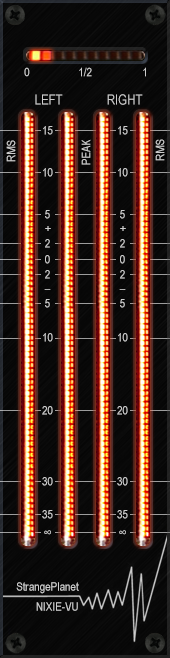
<style>
.page{position:relative;width:170px;height:658px}
.page>*{position:absolute;margin:0}
.t1{font:12px "ArialNarrow"}
.t2{font:12px "ArialNarrow";color:#cdcdcd}
.t3{font:12px "ArialNarrow";color:#cecece}
.t4{font:14px "ArialNarrow";color:#cecece}
.t5{font:12px/10px "ArialNarrow";color:#cecece}
</style>
<div class="page">
<p class="t1" style="left:24px;top:67px;width:6px;height:10px">0</p>
<p class="t2" style="left:79px;top:67px;width:13px;height:10px">1/2</p>
<p class="t3" style="left:143px;top:67px;width:3px;height:10px">1</p>
<p class="t4" style="left:35px;top:94px;width:28px;height:11px">LEFT</p>
<p class="t4" style="left:107px;top:94px;width:36px;height:11px">RIGHT</p>
<p class="t3" style="left:43px;top:126px;width:10px;height:9px">15</p>
<p class="t2" style="left:118px;top:126px;width:10px;height:9px">15</p>
<p class="t3" style="left:6px;top:140px;width:10px;height:22px;rotate:-90deg">RMS</p>
<p class="t2" style="left:81px;top:139px;width:10px;height:26px;rotate:-90deg">PEAK</p>
<p class="t3" style="left:155px;top:139px;width:10px;height:22px;rotate:-90deg">RMS</p>
<p class="t3" style="left:43px;top:168px;width:10px;height:9px">10</p>
<p class="t3" style="left:118px;top:168px;width:10px;height:9px">10</p>
<p class="t3" style="left:45px;top:210px;width:5px;height:9px">5</p>
<p class="t3" style="left:120px;top:210px;width:5px;height:9px">5</p>
<p class="t2" style="left:45px;top:226px;width:6px;height:5px">+</p>
<p class="t3" style="left:120px;top:226px;width:6px;height:5px">+</p>
<p class="t3" style="left:45px;top:239px;width:5px;height:9px">2</p>
<p class="t3" style="left:120px;top:239px;width:5px;height:9px">2</p>
<p class="t2" style="left:45px;top:255px;width:5px;height:9px">0</p>
<p class="t3" style="left:120px;top:255px;width:5px;height:9px">0</p>
<p class="t2" style="left:45px;top:270px;width:5px;height:9px">2</p>
<p class="t3" style="left:120px;top:270px;width:5px;height:9px">2</p>
<p class="t1" style="left:44px;top:289px;width:7px;height:1px">–</p>
<p class="t1" style="left:119px;top:289px;width:7px;height:1px">–</p>
<p class="t3" style="left:45px;top:299px;width:5px;height:9px">5</p>
<p class="t3" style="left:120px;top:299px;width:5px;height:9px">5</p>
<p class="t3" style="left:43px;top:333px;width:10px;height:9px">10</p>
<p class="t2" style="left:118px;top:333px;width:10px;height:9px">10</p>
<p class="t3" style="left:42px;top:406px;width:11px;height:9px">20</p>
<p class="t2" style="left:117px;top:406px;width:11px;height:9px">20</p>
<p class="t2" style="left:42px;top:477px;width:11px;height:9px">30</p>
<p class="t2" style="left:117px;top:477px;width:11px;height:9px">30</p>
<p class="t3" style="left:42px;top:510px;width:11px;height:9px">35</p>
<p class="t3" style="left:117px;top:510px;width:11px;height:9px">35</p>
<p class="t1" style="left:44px;top:530px;width:7px;height:5px">∞</p>
<p class="t1" style="left:119px;top:530px;width:7px;height:5px">∞</p>
<p class="t5" style="left:16px;top:582px;width:63px;height:29px;text-align:right">StrangePlanet<br><br>NIXIE-VU</p>
</div>
